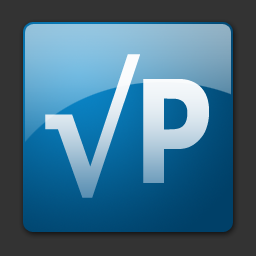
<style>
.page{position:relative;width:256px;height:256px;background:#333333}
.page>*{position:absolute;margin:0}
.t1{font:143px "Verdana-Bold";scale:0.77 1}
</style>
<div class="page">
<p class="t1" style="left:45px;top:54px;width:164px;height:144px">√P</p>
</div>
